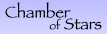
<style>
.page{position:relative;width:107px;height:34px}
.page>*{position:absolute;margin:0}
.t1{font:16px "Papyrus";color:#000000}
.t2{font:11px "Papyrus";color:#000000}
</style>
<div class="page">
<p class="t1" style="left:5px;top:2px;width:66px;height:16px">Chamber</p>
<p class="t1" style="left:49px;top:18px;width:53px;height:12px"><span class="t2">of</span> Stars</p>
</div>
